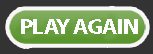
<style>
.page{position:relative;width:153px;height:54px;background:#333333}
.page>*{position:absolute;margin:0}
.t1{font:22px "MyriadPro-Bold";letter-spacing:-0.05em;color:#fdfdfd;text-transform:uppercase;scale:1.1 1}
</style>
<div class="page">
<p class="t1" style="left:21px;top:19px;width:117px;height:15px">play again</p>
</div>
